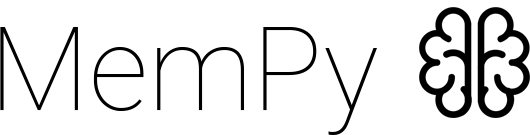
<style>
.page{position:relative;width:530px;height:135px;background:#ffffff}
.page>*{position:absolute;margin:0}
.t1{font:116.7px "Roboto-Thin";color:#000000}
</style>
<div class="page">
<p class="t1" style="left:0px;top:27px;width:377px;height:108px">MemPy</p>
</div>
